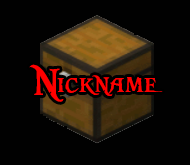
<style>
.page{position:relative;width:190px;height:165px;background:#010101}
.page>*{position:absolute;margin:0}
.t1{font:40px "PiecesofEight";color:#ff0000}
</style>
<div class="page">
<p class="t1" style="left:29px;top:64px;width:134px;height:38px">Nickname</p>
</div>
